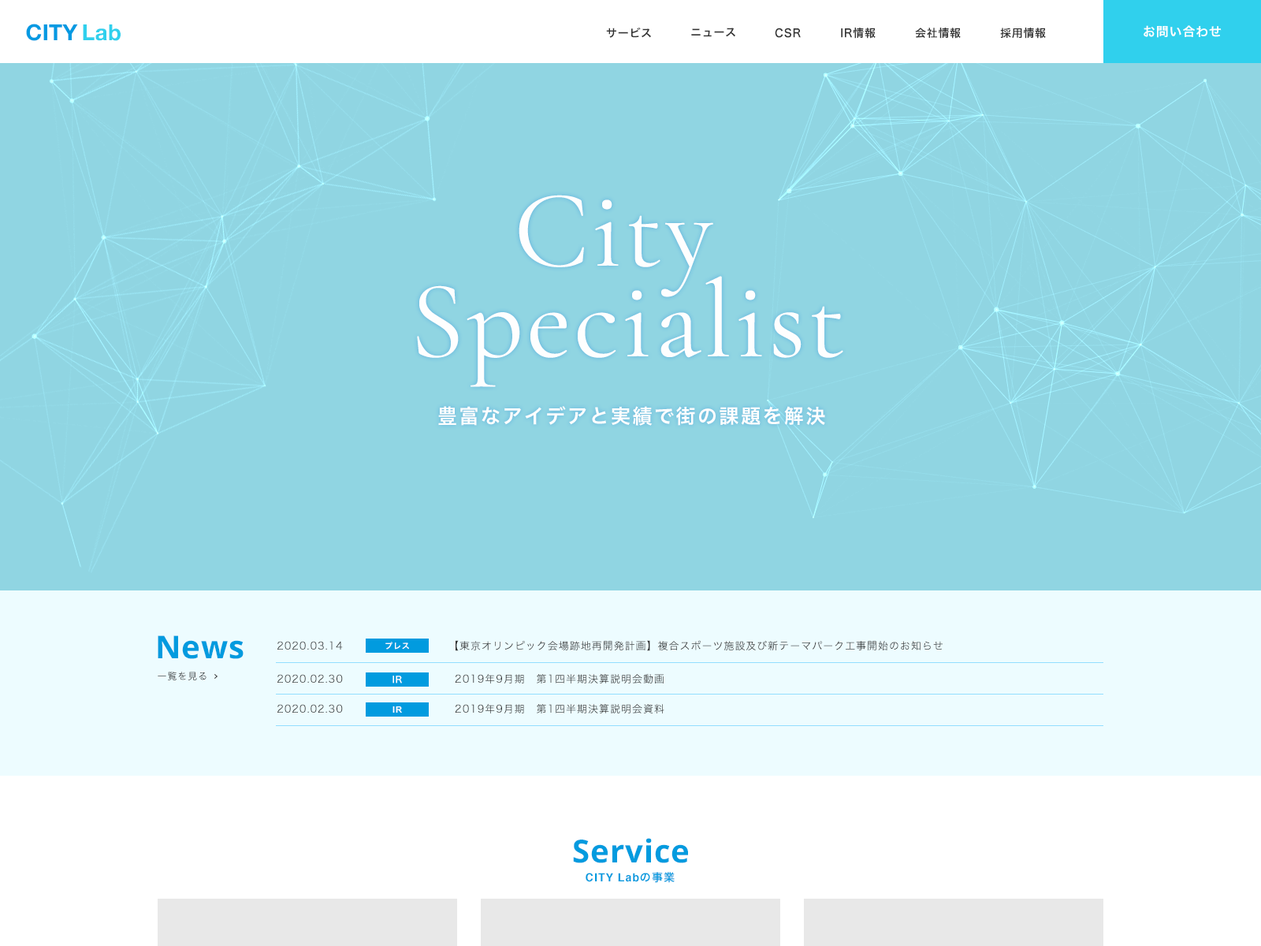
<style>
.page{position:relative;width:1261px;height:946px;background:#90d5e2}
.page>*{position:absolute;margin:0}
.t1{font:22.1px "HelveticaNeue-Bold";letter-spacing:0.01em;color:#029ae2}
.t2{font:22.1px "HelveticaNeue-Bold";letter-spacing:0.01em;color:#30d0ed}
.t3{font:11px "HiraKakuPro-W6";letter-spacing:0.05em;color:#333333}
.t4{font:12.6px "HiraKakuPro-W6";letter-spacing:0.05em;color:#ffffff}
.t5{font:110.3px/90.6px "CormorantGaramond-Regular";letter-spacing:0.025em;color:#fefefe}
.t6{font:19.7px "HiraKakuProN-W6";letter-spacing:0.1em;color:#fefefe}
.t7{font:31.5px "OpenSans-Bold";letter-spacing:0.025em;color:#019bdf}
.t8{font:10.2px "HiraKakuPro-W3";letter-spacing:0.075em;color:#333333}
.t9{font:7.9px "HiraKakuPro-W6";letter-spacing:0.075em;color:#ffffff}
.t10{font:9.5px "HiraKakuPro-W3";letter-spacing:0.075em}
.t11{font:8.7px "HiraKakuPro-W6";letter-spacing:0.075em;color:#ffffff}
.t12{font:8.7px "Arial-BoldMT";letter-spacing:0.075em;color:#ffffff}
.t13{font:11px "Helvetica-Bold";letter-spacing:0.075em;color:#149fe0}
.t14{font:11px "HiraKakuPro-W6";letter-spacing:0.075em;color:#149fe0}
</style>
<div class="page">
<p class="t1" style="left:26px;top:24px;width:95px;height:17px">CITY <span class="t2">Lab</span></p>
<p class="t3" style="left:606px;top:27px;width:45px;height:11px">サービス</p>
<p class="t3" style="left:691px;top:28px;width:44px;height:9px">ニュース</p>
<p class="t3" style="left:775px;top:28px;width:26px;height:10px">CSR</p>
<p class="t3" style="left:841px;top:28px;width:35px;height:11px">IR情報</p>
<p class="t3" style="left:915px;top:28px;width:46px;height:11px">会社情報</p>
<p class="t3" style="left:1000px;top:28px;width:46px;height:11px">採用情報</p>
<p class="t4" style="left:1143px;top:25px;width:79px;height:13px">お問い合わせ</p>
<p class="t5" style="left:417px;top:195px;width:426px;height:192px;text-align:center">City <br>Specialist</p>
<p class="t6" style="left:438px;top:406px;width:387px;height:20px">豊富なアイデアと実績で街の課題を解決</p>
<p class="t7" style="left:158px;top:635px;width:86px;height:24px">News</p>
<p class="t8" style="left:277px;top:641px;width:66px;height:8px">2020.03.14</p>
<p class="t9" style="left:385px;top:641px;width:24px;height:8px">プレス</p>
<p class="t8" style="left:456px;top:640px;width:487px;height:11px">【東京オリンピック会場跡地再開発計画】複合スポーツ施設及び新テーマパーク工事開始のお知らせ</p>
<p class="t10" style="left:158px;top:671px;width:48px;height:9px">一覧を見る</p>
<p class="t8" style="left:277px;top:674px;width:66px;height:8px">2020.02.30</p>
<p class="t11" style="left:392px;top:675px;width:10px;height:8px">IR</p>
<p class="t8" style="left:455px;top:673px;width:209px;height:10px">2019年9月期　第1四半期決算説明会動画</p>
<p class="t8" style="left:277px;top:704px;width:66px;height:8px">2020.02.30</p>
<p class="t12" style="left:392px;top:706px;width:10px;height:6px">IR</p>
<p class="t8" style="left:455px;top:703px;width:209px;height:10px">2019年9月期　第1四半期決算説明会資料</p>
<p class="t7" style="left:573px;top:838px;width:115px;height:25px">Service</p>
<p class="t13" style="left:586px;top:872px;width:89px;height:11px">CITY Lab<span class="t14">の事業</span></p>
</div>
